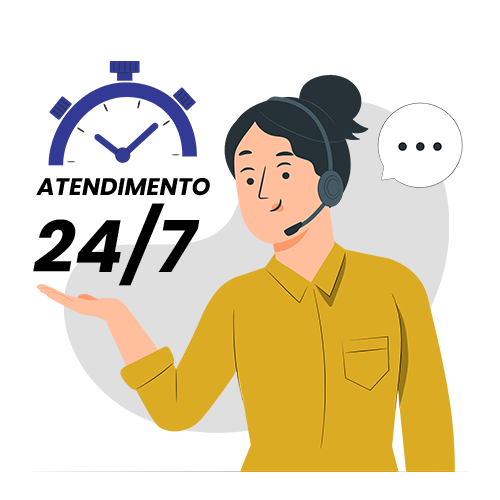
<style>
.page{position:relative;width:500px;height:500px;background:#ffffff}
.page>*{position:absolute;margin:0}
.t1{font:24px "Poppins-BoldItalic";color:#000000}
.t2{font:72px "Poppins-BoldItalic";color:#000000}
</style>
<div class="page">
<p class="t1" style="left:36px;top:178px;width:174px;height:18px">ATENDIMENTO</p>
<p class="t2" style="left:33px;top:203px;width:167px;height:83px">24/7</p>
</div>
